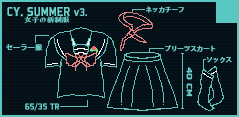
<style>
.page{position:relative;width:239px;height:117px;background:#050f1c}
.page>*{position:absolute;margin:0}
.t1{font:6.5px "AdobeHeitiStd-Regular";color:#6cd1cb}
.t2{font:14.1px "Bombardier";color:#6cd1cb}
.t3{font:14.1px "AdobeHeitiStd-Regular";color:#6cd1cb}
.t4{font:12px "Bombardier";color:#6cd1cb}
.t5{font:6.7px "FZFENGRSTS-EB--GB1-0";color:#6cd1cb;scale:1.13 1}
.t6{font:7.3px "AdobeHeitiStd-Regular";color:#6cd1cb}
.t7{font:8.3px "Bombardier";color:#6cd1cb;scale:1.65 1}
.t8{font:9.2px "Bombardier";color:#6cd1cb;scale:1.08 1}
</style>
<div class="page">
<p class="t1" style="left:145px;top:6px;width:39px;height:7px">ネッカチーフ</p>
<p class="t2" style="left:7px;top:7px;width:80px;height:10px">CY<span class="t3">. </span>SUMMER <span class="t4">v3.</span></p>
<p class="t5" style="left:24px;top:16px;width:46px;height:8px">女子の新制服</p>
<p class="t6" style="left:6px;top:44px;width:37px;height:7px">セーラー服</p>
<p class="t1" style="left:165px;top:45px;width:51px;height:7px">プリーツスカート</p>
<p class="t1" style="left:206px;top:57px;width:26px;height:6px">ソックス</p>
<p class="t7" style="left:186px;top:67px;width:7px;height:30px;rotate:90deg">40 CM</p>
<p class="t8" style="left:25px;top:103px;width:34px;height:8px">65/35 TR</p>
</div>
